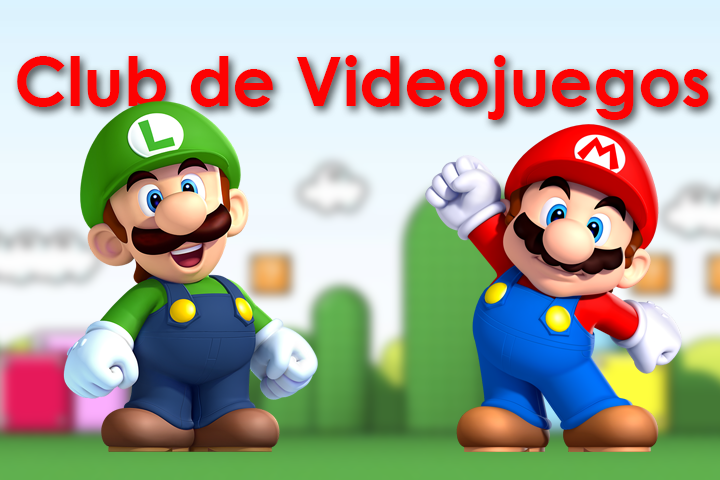
<style>
.page{position:relative;width:720px;height:480px}
.page>*{position:absolute;margin:0}
.t1{font:68px "CenturyGothic-Bold";color:#fd0202}
</style>
<div class="page">
<p class="t1" style="left:17px;top:55px;width:692px;height:65px">Club de Videojuegos</p>
</div>
